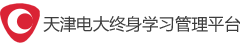
<style>
.page{position:relative;width:240px;height:46px;background:#ffffff}
.page>*{position:absolute;margin:0}
.t1{font:16.4px "MicrosoftYaHei";color:#3d3d3d}
</style>
<div class="page">
<p class="t1" style="left:43px;top:16px;width:198px;height:16px">天津电大终身学习管理平台</p>
</div>
